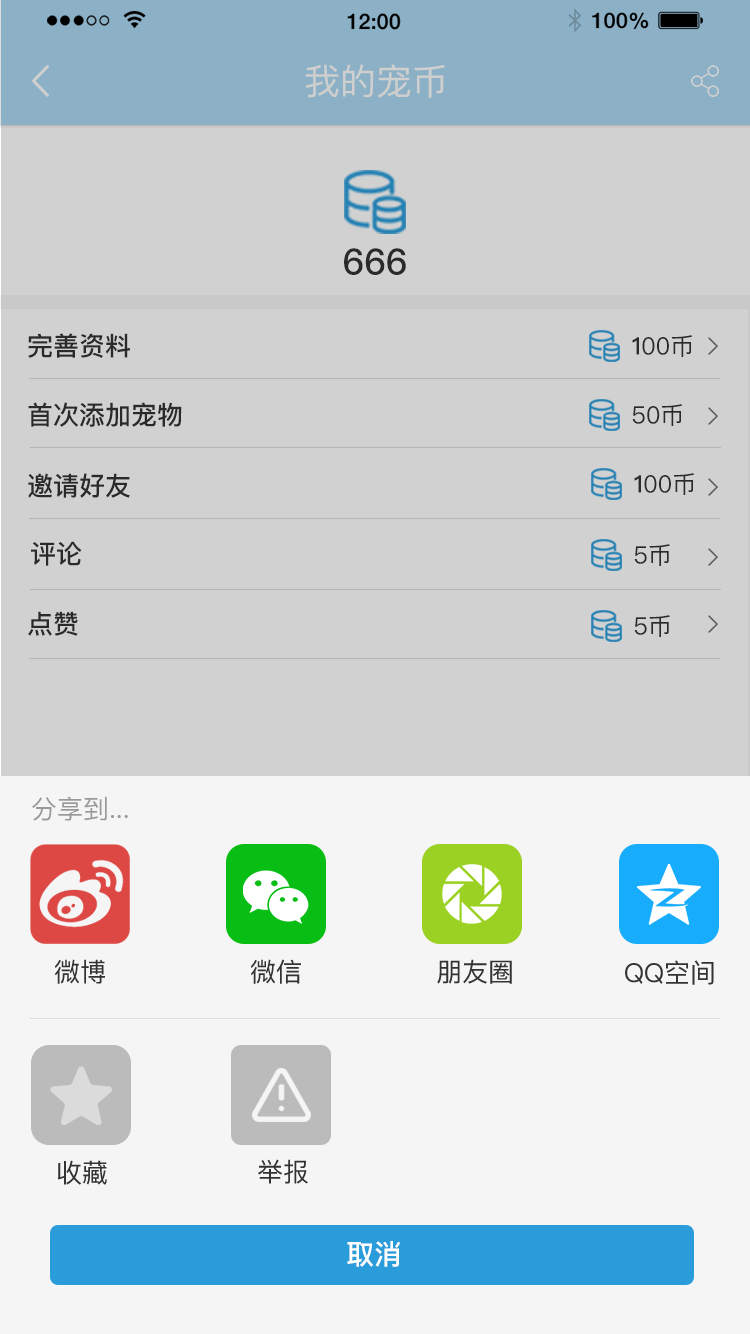
<style>
.page{position:relative;width:750px;height:1334px;background:#d1d1d1}
.page>*{position:absolute;margin:0}
.t1{font:36px "PingFangSC-Regular";color:#cfcfcf}
.t2{font:36px "PingFangSC-Medium";color:#333333}
.t3{font:26px "PingFangSC-Medium";color:#333333}
.t4{font:24px "PingFangSC-Regular";color:#333333}
.t5{font:24px "PingFangSC-Medium";color:#333333}
.t6{font:26px "PingFangSC-Regular";color:#999999}
.t7{font:26px "PingFangSC";color:#333333}
.t8{font:28px "PingFangSC-Medium";color:#ffffff}
</style>
<div class="page">
<p class="t1" style="left:305px;top:64px;width:140px;height:34px">我的宠币</p>
<p class="t2" style="left:344px;top:248px;width:62px;height:27px">666</p>
<p class="t3" style="left:28px;top:333px;width:102px;height:25px">完善资料</p>
<p class="t4" style="left:632px;top:335px;width:61px;height:22px"><span class="t5">1</span>00币</p>
<p class="t3" style="left:28px;top:402px;width:154px;height:25px">首次添加宠物</p>
<p class="t4" style="left:632px;top:404px;width:51px;height:22px">50币</p>
<p class="t3" style="left:28px;top:473px;width:102px;height:25px">邀请好友</p>
<p class="t4" style="left:634px;top:473px;width:61px;height:22px"><span class="t5">1</span>00币</p>
<p class="t3" style="left:31px;top:541px;width:51px;height:25px">评论</p>
<p class="t4" style="left:634px;top:544px;width:36px;height:22px">5币</p>
<p class="t3" style="left:28px;top:611px;width:50px;height:25px">点赞</p>
<p class="t4" style="left:634px;top:615px;width:36px;height:22px">5币</p>
<p class="t6" style="left:32px;top:796px;width:96px;height:25px">分享到...</p>
<p class="t7" style="left:55px;top:959px;width:50px;height:25px">微博</p>
<p class="t7" style="left:251px;top:959px;width:50px;height:25px">微信</p>
<p class="t7" style="left:437px;top:959px;width:75px;height:25px">朋友圈</p>
<p class="t7" style="left:625px;top:960px;width:89px;height:25px">QQ空间</p>
<p class="t7" style="left:57px;top:1160px;width:50px;height:25px">收藏</p>
<p class="t7" style="left:258px;top:1159px;width:50px;height:25px">举报</p>
<p class="t8" style="left:347px;top:1241px;width:53px;height:26px">取消</p>
</div>
